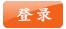
<style>
.page{position:relative;width:66px;height:29px;background:#f2621b}
.page>*{position:absolute;margin:0}
.t1{font:16px "¿¬Ìå";letter-spacing:0.05em;color:#ffffff;font-weight:bold;scale:1.1 1}
</style>
<div class="page">
<p class="t1" style="left:16px;top:7px;width:36px;height:15px">登录</p>
</div>
